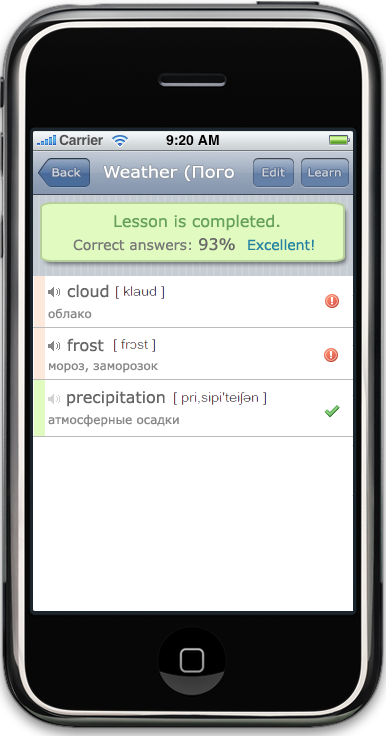
<style>
.page{position:relative;width:386px;height:742px;background:#ffffff}
.page>*{position:absolute;margin:0}
.t1{font:11px "Verdana";color:#d1d5db;scale:1.1 1}
.t2{font:16px "Verdana";color:#ffffff;scale:1.11 1}
.t3{font:16px "Verdana";color:#66a159}
.t4{font:14px "Verdana";color:#777777}
.t5{font:16px "Verdana";color:#666666}
.t6{font:14px "Verdana";color:#2581a2}
.t7{font:12px "Verdana";color:#888888}
</style>
<div class="page">
<p class="t1" style="left:52px;top:168px;width:29px;height:9px">Back</p>
<p class="t2" style="left:103px;top:165px;width:131px;height:16px">Weather (Пого</p>
<p class="t1" style="left:262px;top:168px;width:23px;height:9px">Edit</p>
<p class="t1" style="left:308px;top:168px;width:33px;height:9px">Learn</p>
<p class="t3" style="left:114px;top:214px;width:166px;height:17px">Lesson is completed.</p>
<p class="t4" style="left:73px;top:238px;width:162px;height:13px">Correct answers: <span class="t5">93%</span></p>
<p class="t6" style="left:248px;top:239px;width:66px;height:12px">Excellent!</p>
<p class="t5" style="left:67px;top:284px;width:42px;height:14px">cloud</p>
<p class="t7" style="left:48px;top:308px;width:44px;height:11px">облако</p>
<p class="t5" style="left:67px;top:338px;width:37px;height:14px">frost</p>
<p class="t7" style="left:49px;top:363px;width:109px;height:10px">мороз, заморозок</p>
<p class="t5" style="left:67px;top:391px;width:98px;height:16px">precipitation</p>
<p class="t7" style="left:48px;top:414px;width:131px;height:13px">атмосферные осадки</p>
</div>
